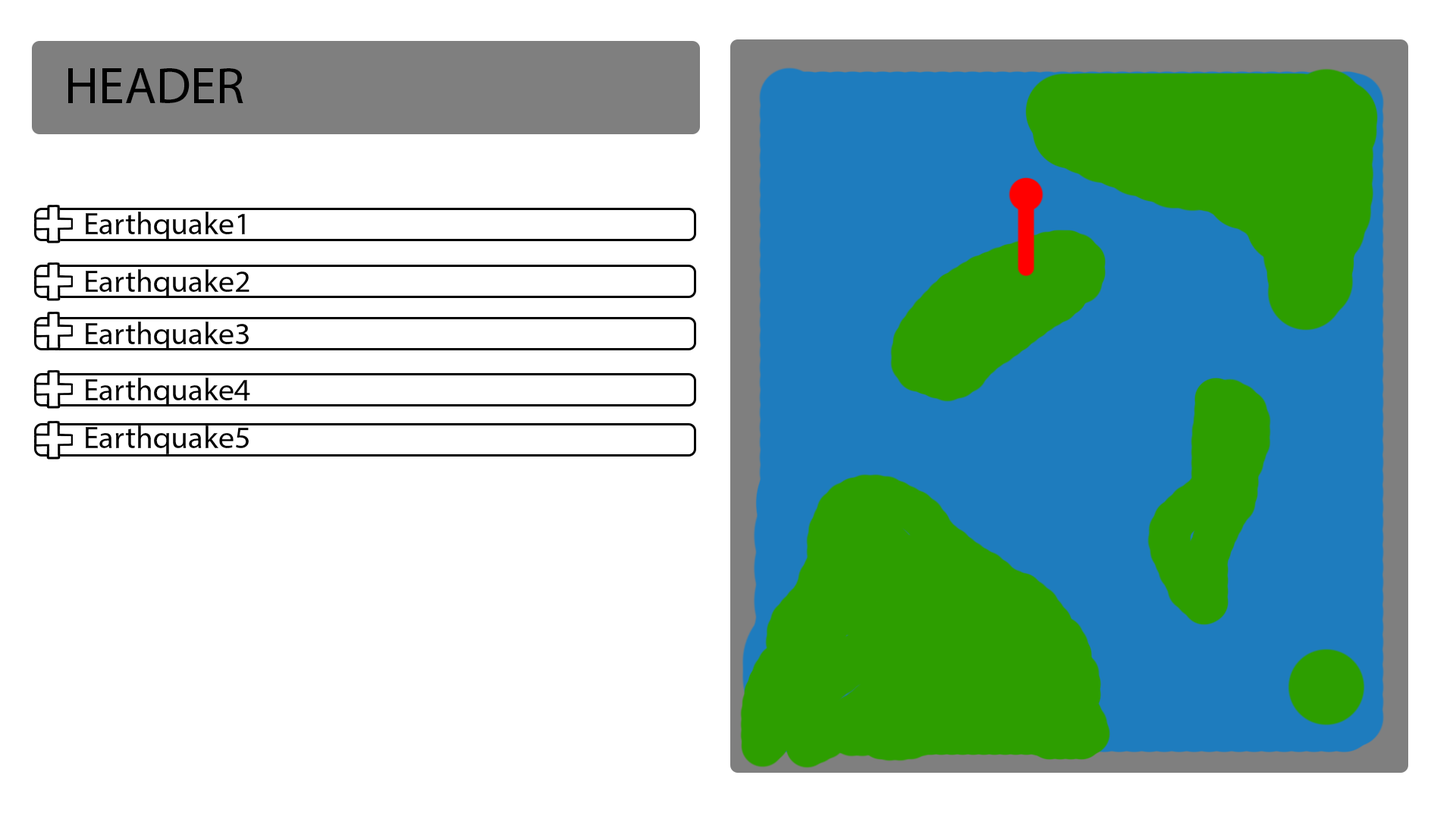
<style>
.page{position:relative;width:1456px;height:819px;background:#ffffff}
.page>*{position:absolute;margin:0}
.t1{font:52.2px "MyriadHebrew-Regular";color:#000000}
.t2{font:31.3px "MyriadHebrew-Regular";color:#000000}
</style>
<div class="page">
<p class="t1" style="left:68px;top:68px;width:175px;height:35px">HEADER</p>
<p class="t2" style="left:86px;top:212px;width:159px;height:28px">Earthquake1</p>
<p class="t2" style="left:86px;top:269px;width:163px;height:29px">Earthquake2</p>
<p class="t2" style="left:86px;top:322px;width:163px;height:28px">Earthquake3</p>
<p class="t2" style="left:86px;top:378px;width:164px;height:28px">Earthquake4</p>
<p class="t2" style="left:86px;top:425px;width:163px;height:29px">Earthquake5</p>
</div>
